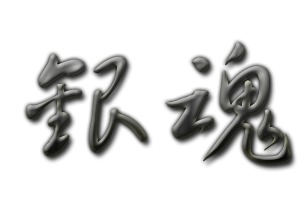
<style>
.page{position:relative;width:300px;height:200px;background:#ffffff}
.page>*{position:absolute;margin:0}
.t1{font:150px "FZHCJW--GB1-0";letter-spacing:-0.025em}
</style>
<div class="page">
<p class="t1" style="left:26px;top:42px;width:265px;height:123px">银魂</p>
</div>
